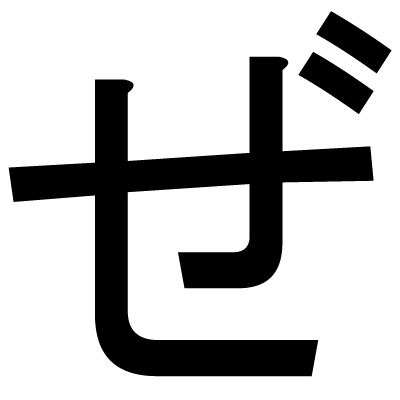
<style>
.page{position:relative;width:400px;height:400px;background:#ffffff}
.page>*{position:absolute;margin:0}
.t1{font:416.7px "MS-PGothic";color:#000000}
</style>
<div class="page">
<p class="t1" style="left:8px;top:11px;width:384px;height:366px">ぜ</p>
</div>
